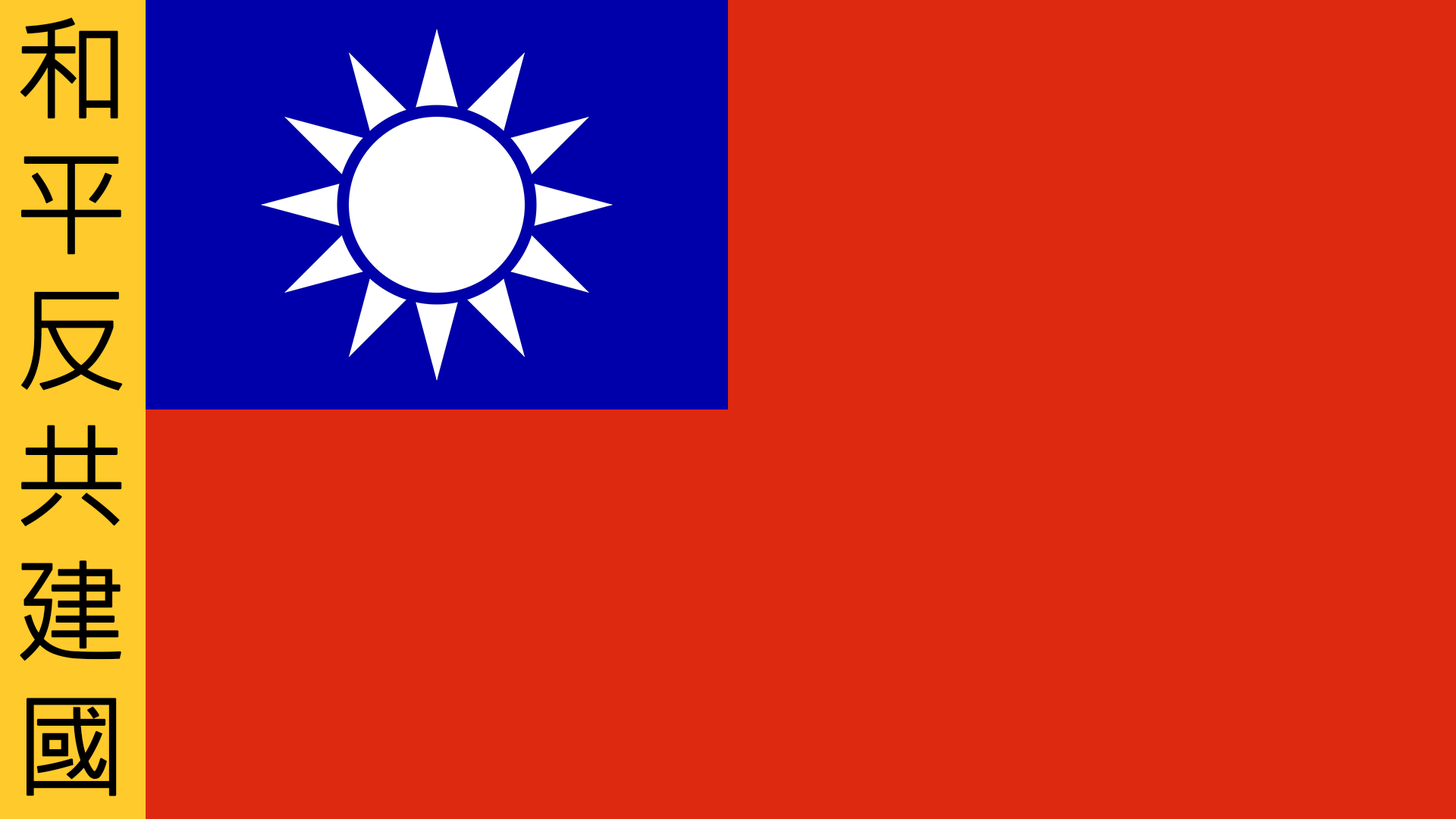
<style>
.page{position:relative;width:1456px;height:819px;background:#dd2910}
.page>*{position:absolute;margin:0}
.t1{font:113px "MicrosoftJhengHeiRegular";color:#000000;font-weight:bold}
</style>
<div class="page">
<p class="t1" style="left:20px;top:17px;width:103px;height:779px">和<br>平<br>反<br>共<br>建<br>國</p>
</div>
